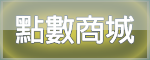
<style>
.page{position:relative;width:150px;height:60px}
.page>*{position:absolute;margin:0}
.t1{font:30px "AdobeFanHeitiStd-Bold";color:#ffffff}
</style>
<div class="page">
<p class="t1" style="left:16px;top:15px;width:118px;height:29px">點數商城</p>
<p class="t1" style="left:16px;top:15px;width:118px;height:29px">點數商城</p>
</div>
